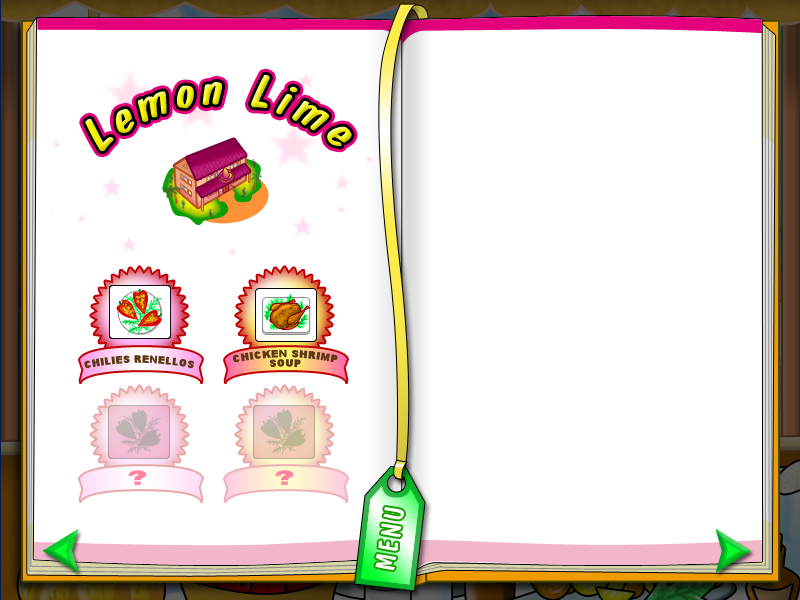
<style>
.page{position:relative;width:800px;height:600px;background:#ffffff}
.page>*{position:absolute;margin:0}
.t1{font:48.9px "DomCasualBT-Regular";letter-spacing:0.095em;font-style:italic}
.t2{font:9.4px/9.4px "Arial-Black";letter-spacing:0.045em;color:#5b3714;text-transform:uppercase}
.t3{font:9.4px "Arial-Black";letter-spacing:0.045em;color:#5b3714;text-transform:uppercase}
.t4{font:18.5px "Arial-Black";letter-spacing:0.045em;color:#ff84a1;text-transform:uppercase}
.t5{font:28.1px "DomCasualBT-Regular";letter-spacing:0.09em;color:#ffffff;font-variant:small-caps}
</style>
<div class="page">
<p class="t1" style="left:85px;top:75px;width:267px;height:76px;rotate:-1deg">Lemon Lime</p>
<p class="t2" style="left:233px;top:349px;width:105px;height:18px;text-align:center">chicken shrimp<br>soup</p>
<p class="t3" style="left:84px;top:355px;width:111px;height:13px">chilies renellos</p>
<p class="t4" style="left:128px;top:470px;width:19px;height:15px">?</p>
<p class="t4" style="left:275px;top:470px;width:19px;height:15px">?</p>
<p class="t5" style="left:375px;top:507px;width:29px;height:63px;rotate:-80deg">MENU</p>
</div>
